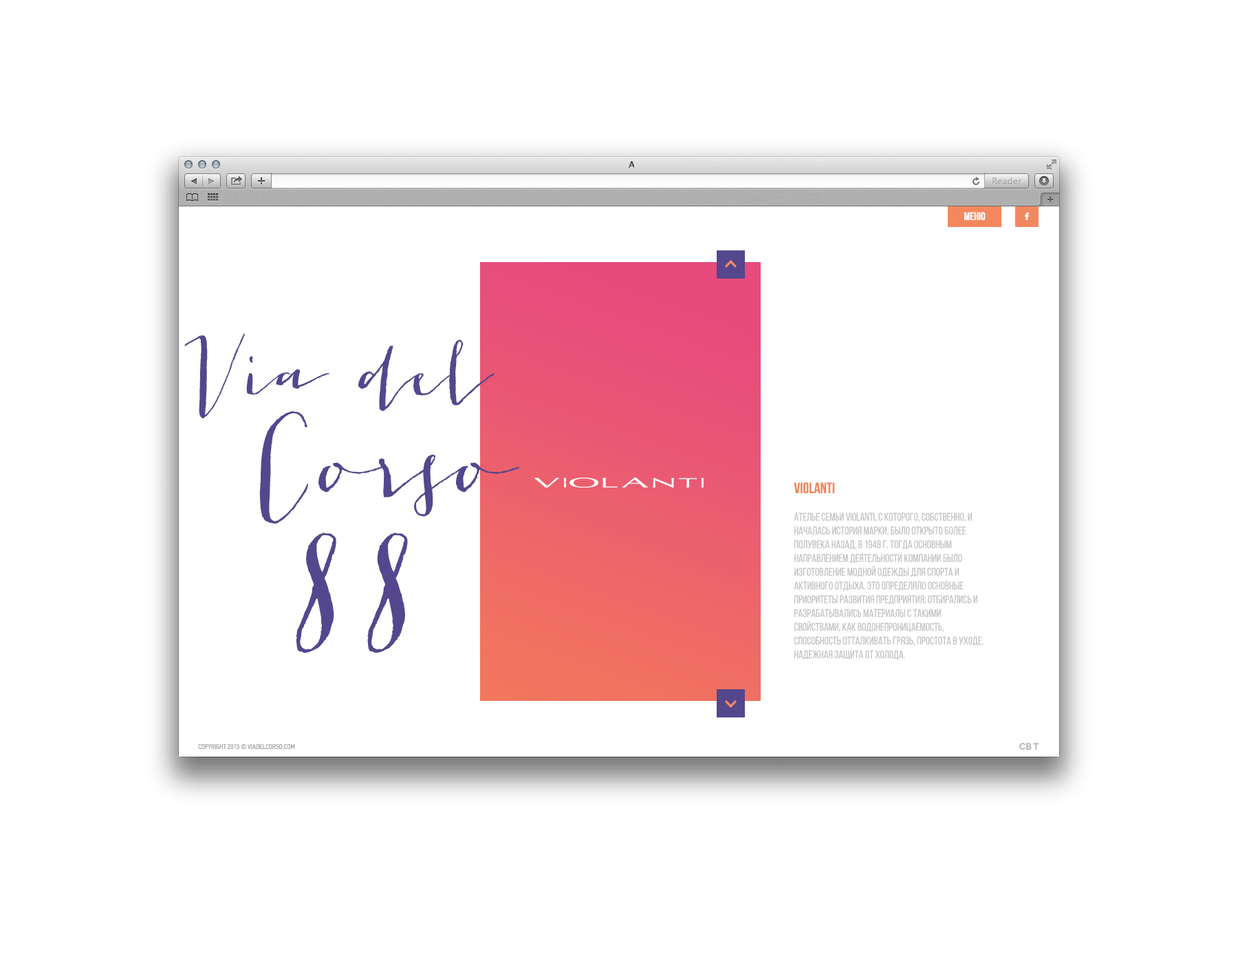
<style>
.page{position:relative;width:1238px;height:963px;background:#ffffff}
.page>*{position:absolute;margin:0}
.t1{font:11px "BebasNeueBold";color:#ffffff}
.t2{font:79.9px "JacquesGilles";color:#54478d}
.t3{font:97.8px "JacquesGilles";color:#54478d}
.t4{font:11px/13.8px "BebasNeueRegular";color:#c6c6c6}
.t5{font:15.1px/13.8px "BebasNeueBold";color:#f3885e}
.t6{font:133.9px "JacquesGilles";color:#54478d}
.t7{font:6.9px "PFDinTextCondPro-Regular";color:#a3a3a3;text-transform:uppercase}
</style>
<div class="page">
<p class="t1" style="left:964px;top:212px;width:22px;height:8px">Меню</p>
<p class="t2" style="left:184px;top:333px;width:311px;height:86px">Via del</p>
<p class="t3" style="left:259px;top:411px;width:260px;height:112px">Corso</p>
<p class="t4" style="left:794px;top:482px;width:190px;height:178px"><span class="t5">Violanti<br><br></span>Ателье семьи Violanti, с которого, собственно, и началась история марки, было открыто более полувека назад, в 1948 г. Тогда основным направлением деятельности компании было изготовление модной одежды для спорта и активного отдыха. Это определяло основные приоритеты развития предприятия: отбирались и разрабатывались материалы с такими свойствами, как водонепроницаемость, способность отталкивать грязь, простота в уходе, надежная защита от холода.</p>
<p class="t6" style="left:296px;top:532px;width:112px;height:121px">88</p>
<p class="t7" style="left:198px;top:744px;width:97px;height:5px">Copyright 2015 © viadelcorso.com</p>
</div>
